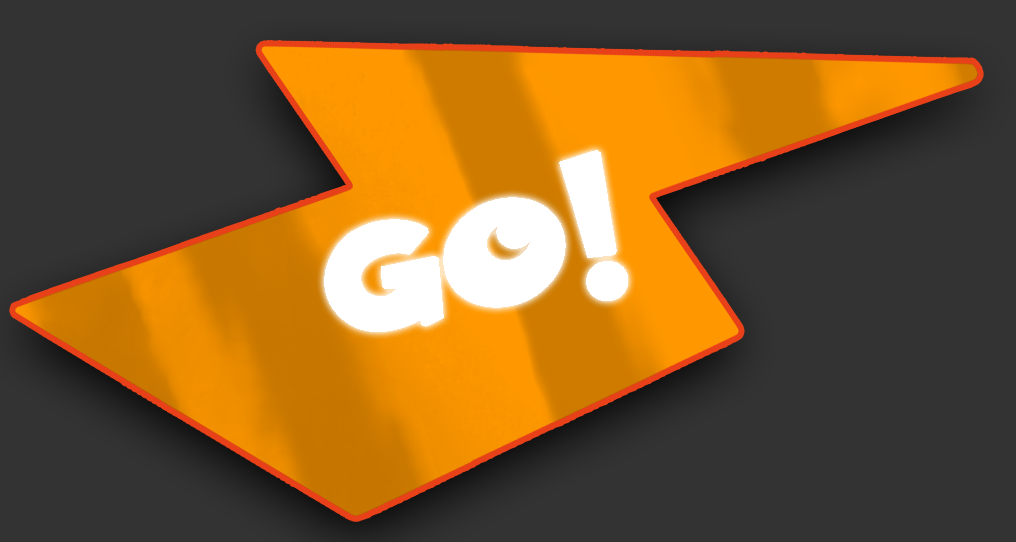
<style>
.page{position:relative;width:1016px;height:542px;background:#333333}
.page>*{position:absolute;margin:0}
.t1{font:192.4px "Poke";letter-spacing:0.01em;color:#ffffff;font-weight:bold;scale:1.1 1}
</style>
<div class="page">
<p class="t1" style="left:324px;top:150px;width:304px;height:182px;rotate:-12deg">GO!</p>
</div>
